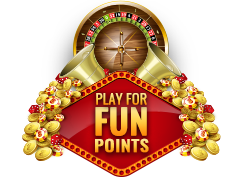
<style>
.page{position:relative;width:243px;height:177px;background:#ffffff}
.page>*{position:absolute;margin:0}
.t1{font:13.6px "Oswald-Light";font-weight:bold;scale:1.04 1}
.t2{font:34px "Oswald-Medium";font-weight:bold}
.t3{font:16px "Oswald-Medium";letter-spacing:0.02em;font-weight:bold;scale:1.11 1}
</style>
<div class="page">
<p class="t1" style="left:96px;top:93px;width:51px;height:12px">PLAY FOR</p>
<p class="t2" style="left:95px;top:107px;width:52px;height:29px">FUN</p>
<p class="t3" style="left:95px;top:138px;width:54px;height:15px">POINTS</p>
</div>
